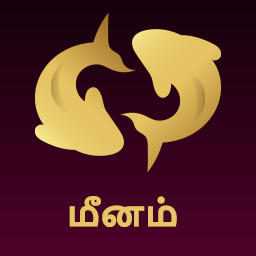
<style>
.page{position:relative;width:256px;height:256px}
.page>*{position:absolute;margin:0}
.t1{font:34.1px "NirmalaUI-Bold";letter-spacing:-0.05em;color:#e6c565;text-transform:uppercase;font-weight:bold}
</style>
<div class="page">
<p class="t1" style="left:69px;top:196px;width:108px;height:31px">மீனம்</p>
</div>
